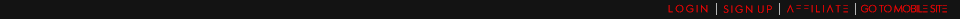
<style>
.page{position:relative;width:960px;height:19px;background:#131313}
.page>*{position:absolute;margin:0}
.t1{font:10px "Pasajero";color:#ff0000}
.t2{font:10px "Pasajero"}
</style>
<div class="page">
<p class="t1" style="left:668px;top:4px;width:40px;height:9px">L O G I N</p>
<p class="t1" style="left:723px;top:5px;width:49px;height:8px">S I G N  U P</p>
<p class="t2" style="left:787px;top:4px;width:61px;height:9px">A F F I L I A T E</p>
<p class="t1" style="left:861px;top:4px;width:86px;height:9px">GO TO MOBILE SITE</p>
</div>
